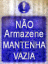
<style>
.page{position:relative;width:48px;height:64px}
.page>*{position:absolute;margin:0}
.t1{font:10px "ArialMT";color:#d6d6e7;font-weight:bold;scale:0.83 1}
.t2{font:10px "ArialMT";color:#d6d6e7;text-transform:uppercase;font-weight:bold;scale:0.83 1}
.t3{font:10px "ArialMT";color:#d6d6e7;text-transform:uppercase;font-weight:bold;scale:0.81 1}
.t4{font:9px "ArialMT";color:#d6d6e7;text-transform:uppercase;font-weight:bold;scale:0.81 1}
</style>
<div class="page">
<p class="t1" style="left:4px;top:29px;width:40px;height:9px"><span class="t2">a</span>rmazene</p>
<p class="t3" style="left:16px;top:19px;width:18px;height:10px">NÃO</p>
<p class="t4" style="left:3px;top:41px;width:43px;height:19px;text-align:center">MANTENHA<br>VAZIA</p>
</div>
